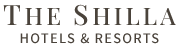
<style>
.page{position:relative;width:180px;height:52px;background:#ffffff}
.page>*{position:absolute;margin:0}
.t1{font:13px/18px "NotoSansCJKkr-Medium";letter-spacing:0.09em;color:#4a433b}
.t2{font:28px/18px "PlayfairDisplay-Medium";letter-spacing:0.13em;color:#4a433b}
.t3{font:24px/18px "PlayfairDisplay-Medium";letter-spacing:0.13em;color:#4a433b}
</style>
<div class="page">
<p class="t1" style="left:3px;top:4px;width:173px;height:40px;text-align:center"><span class="t2">T</span><span class="t3">HE </span><span class="t2">S</span><span class="t3">HILLA<br></span>HOTELS &amp; RESORTS</p>
</div>
